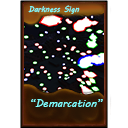
<style>
.page{position:relative;width:128px;height:128px;background:#ffffff}
.page>*{position:absolute;margin:0}
.t1{font:8px "MVBoli";color:#7fffff}
.t2{font:10.7px "MVBoli";color:#7fffff}
</style>
<div class="page">
<p class="t1" style="left:28px;top:5px;width:52px;height:9px">Darkness Sign</p>
<p class="t2" style="left:31px;top:99px;width:72px;height:8px">“Demarcation”</p>
</div>
